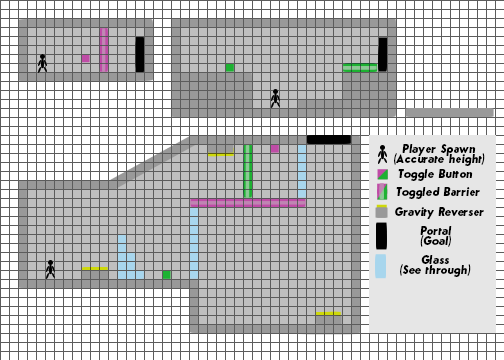
<style>
.page{position:relative;width:504px;height:360px;background:#ffffff}
.page>*{position:absolute;margin:0}
.t1{font:11.9px/9.9px "Semplicita-BoldItalic";letter-spacing:-0.015em;color:#000000;scale:0.9 1}
.t2{font:11.9px "Semplicita-BoldItalic";letter-spacing:-0.015em;color:#000000;scale:0.9 1}
</style>
<div class="page">
<p class="t1" style="left:394px;top:144px;width:91px;height:22px;text-align:center">Player Spawn<br>(Accurate height)</p>
<p class="t2" style="left:398px;top:169px;width:75px;height:12px">Toggle Button</p>
<p class="t2" style="left:396px;top:187px;width:84px;height:12px">Toggled Barrier</p>
<p class="t2" style="left:395px;top:207px;width:89px;height:12px">Gravity Reverser</p>
<p class="t1" style="left:420px;top:226px;width:32px;height:21px;text-align:center">Portal<br>(Goal)</p>
<p class="t1" style="left:400px;top:255px;width:71px;height:22px;text-align:center">Glass<br>(See through)</p>
</div>
